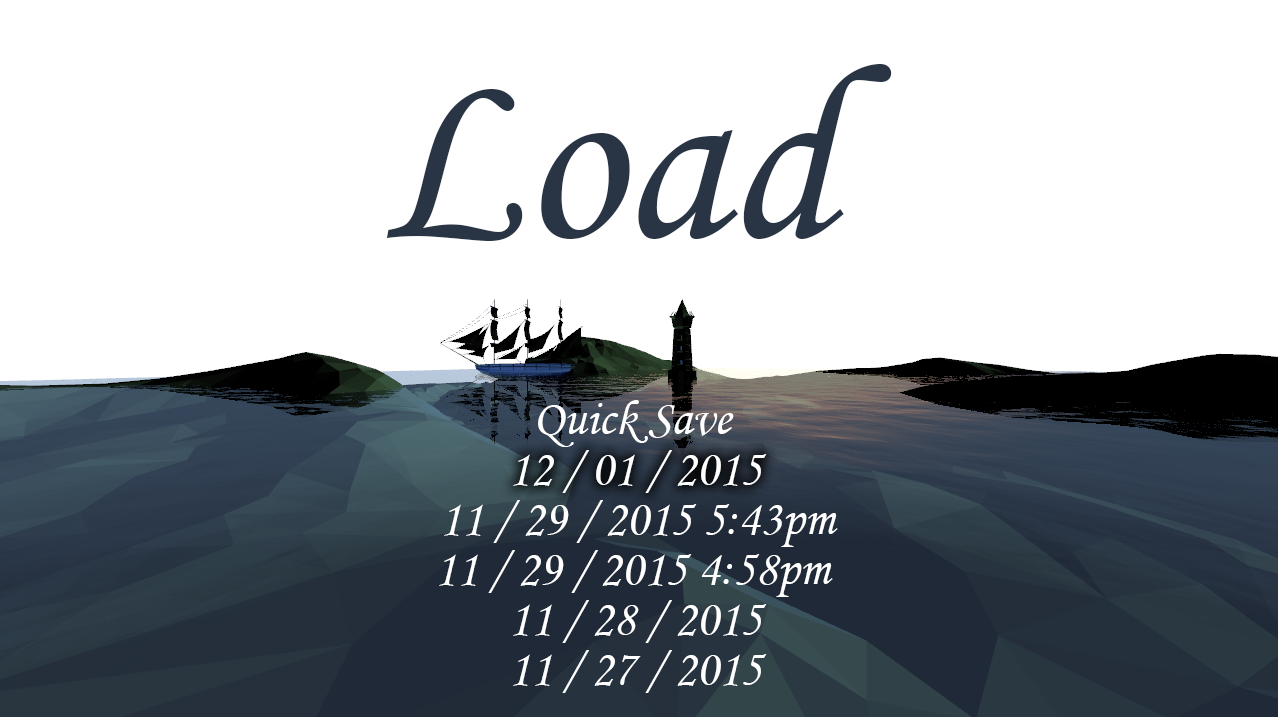
<style>
.page{position:relative;width:1278px;height:717px;background:#ffffff}
.page>*{position:absolute;margin:0}
.t1{font:250px "MonotypeCorsiva";color:#293545}
.t2{font:50px "MonotypeCorsiva";color:#ffffff}
</style>
<div class="page">
<p class="t1" style="left:386px;top:64px;width:506px;height:177px">Load</p>
<p class="t2" style="left:538px;top:400px;width:196px;height:47px">Quick Save</p>
<p class="t2" style="left:513px;top:450px;width:254px;height:43px">12 / 01 / 2015</p>
<p class="t2" style="left:444px;top:500px;width:394px;height:47px">11 / 29 / 2015 5:43pm</p>
<p class="t2" style="left:439px;top:550px;width:394px;height:47px">11 / 29 / 2015 4:58pm</p>
<p class="t2" style="left:513px;top:600px;width:254px;height:43px">11 / 28 / 2015</p>
<p class="t2" style="left:513px;top:650px;width:254px;height:43px">11 / 27 / 2015</p>
</div>
